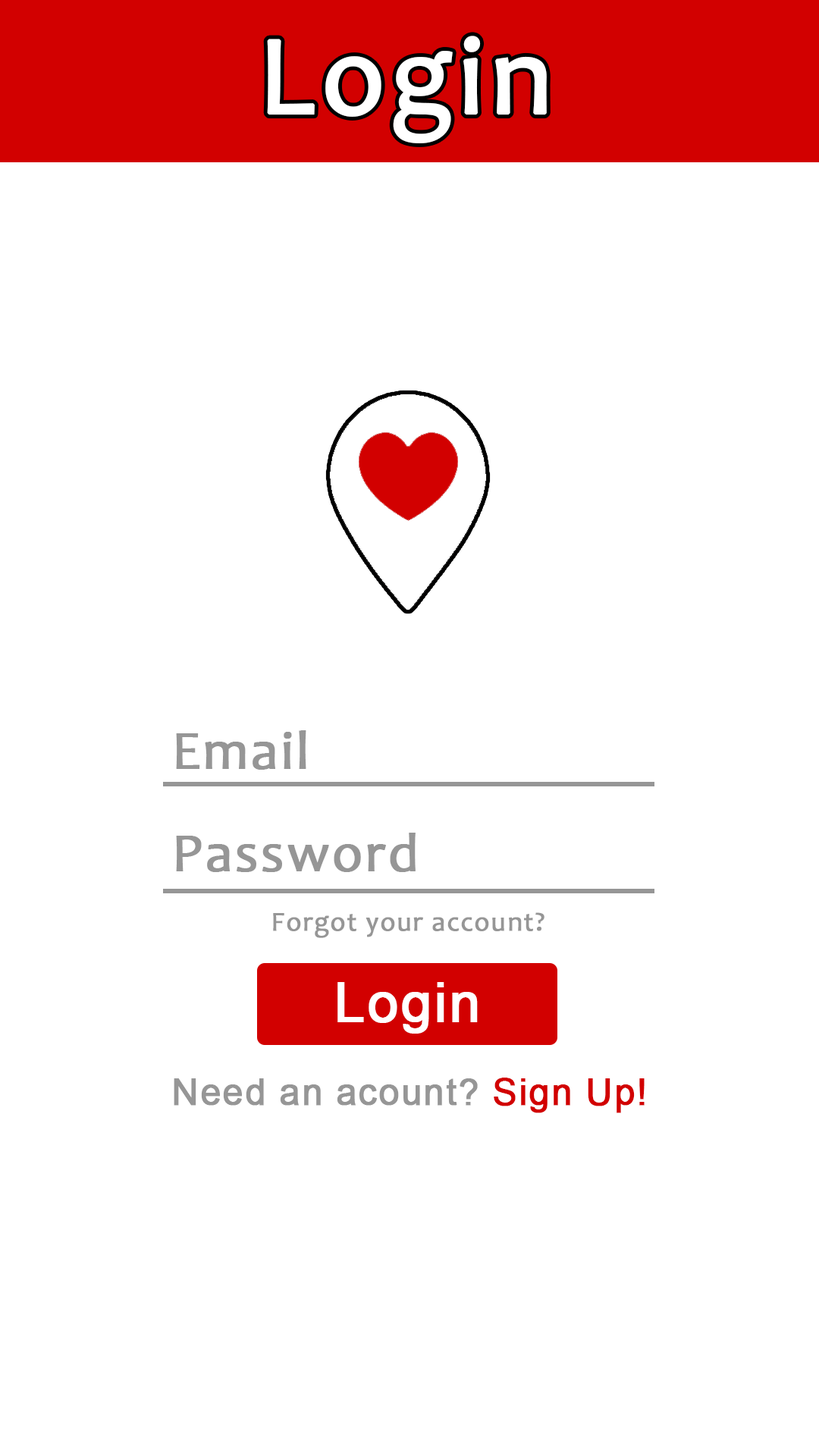
<style>
.page{position:relative;width:819px;height:1456px;background:#ffffff}
.page>*{position:absolute;margin:0}
.t1{font:113.4px "Candara";letter-spacing:0.03em;color:#ffffff;font-weight:bold}
.t2{font:54.6px "Candara";letter-spacing:0.03em;color:#969696;font-weight:bold}
.t3{font:27.5px "Candara";letter-spacing:0.03em;color:#969696;font-weight:bold}
.t4{font:54.6px "ArialMT";letter-spacing:0.03em;color:#ffffff;font-weight:bold}
.t5{font:36.4px "ArialMT";letter-spacing:0.03em;color:#969696;font-weight:bold}
.t6{font:36.4px "ArialMT";letter-spacing:0.03em;color:#d20000;font-weight:bold}
</style>
<div class="page">
<p class="t1" style="left:267px;top:36px;width:280px;height:107px">Login</p>
<p class="t2" style="left:176px;top:730px;width:130px;height:40px">Email</p>
<p class="t2" style="left:176px;top:833px;width:240px;height:39px">Password</p>
<p class="t3" style="left:273px;top:912px;width:271px;height:26px">Forgot your account?</p>
<p class="t4" style="left:337px;top:982px;width:141px;height:52px">Login</p>
<p class="t5" style="left:174px;top:1078px;width:471px;height:35px">Need an acount? <span class="t6">Sign Up!</span></p>
</div>
